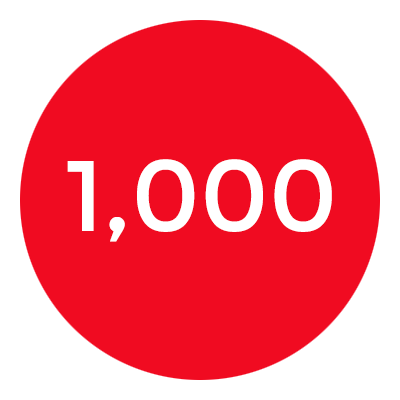
<style>
.page{position:relative;width:400px;height:400px;background:#f00b21}
.page>*{position:absolute;margin:0}
.t1{font:100px "Montserrat-Regular";color:#ffffff}
</style>
<div class="page">
<p class="t1" style="left:67px;top:159px;width:265px;height:83px">1,000</p>
</div>
